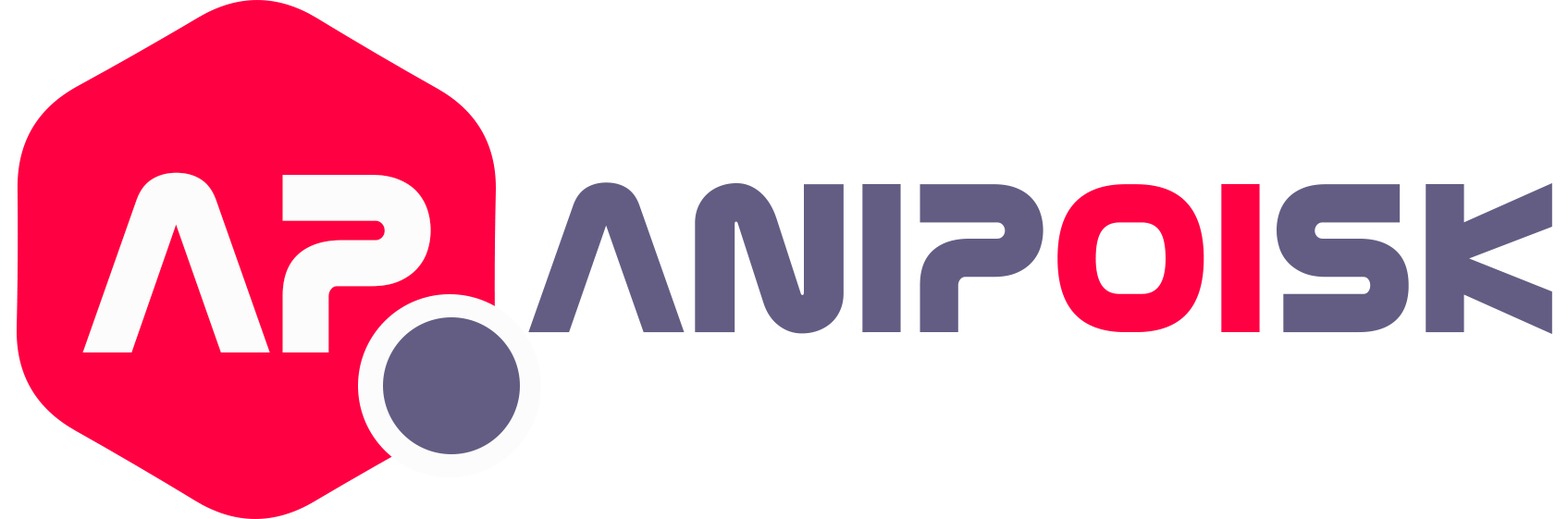
<style>
.page{position:relative;width:1568px;height:519px;background:#ffffff}
.page>*{position:absolute;margin:0}
.t1{font:254.4px "NasalizationHeavy";color:#fcfcfc}
.t2{font:212px "NasalizationHeavy";color:#635d84}
.t3{font:212px "NasalizationHeavy";color:#ff0042}
</style>
<div class="page">
<p class="t1" style="left:82px;top:172px;width:349px;height:180px">AP</p>
<p class="t2" style="left:528px;top:182px;width:1024px;height:152px">AniP<span class="t3">oi</span>sk</p>
</div>
